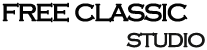
<style>
.page{position:relative;width:207px;height:50px;background:#ffffff}
.page>*{position:absolute;margin:0}
.t1{font:30px "CopperplateGothic-Light";letter-spacing:-0.075em;color:#040404;font-weight:bold}
.t2{font:24px "CopperplateGothic-Light";letter-spacing:-0.075em;color:#161615;font-weight:bold}
</style>
<div class="page">
<p class="t1" style="left:2px;top:2px;width:186px;height:21px">free classic</p>
<p class="t2" style="left:126px;top:32px;width:79px;height:16px">studio</p>
</div>
